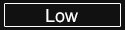
<style>
.page{position:relative;width:125px;height:30px;background:#111111}
.page>*{position:absolute;margin:0}
.t1{font:18px "ArialMT";color:#ffffff}
</style>
<div class="page">
<p class="t1" style="left:46px;top:9px;width:32px;height:14px">Low</p>
</div>
